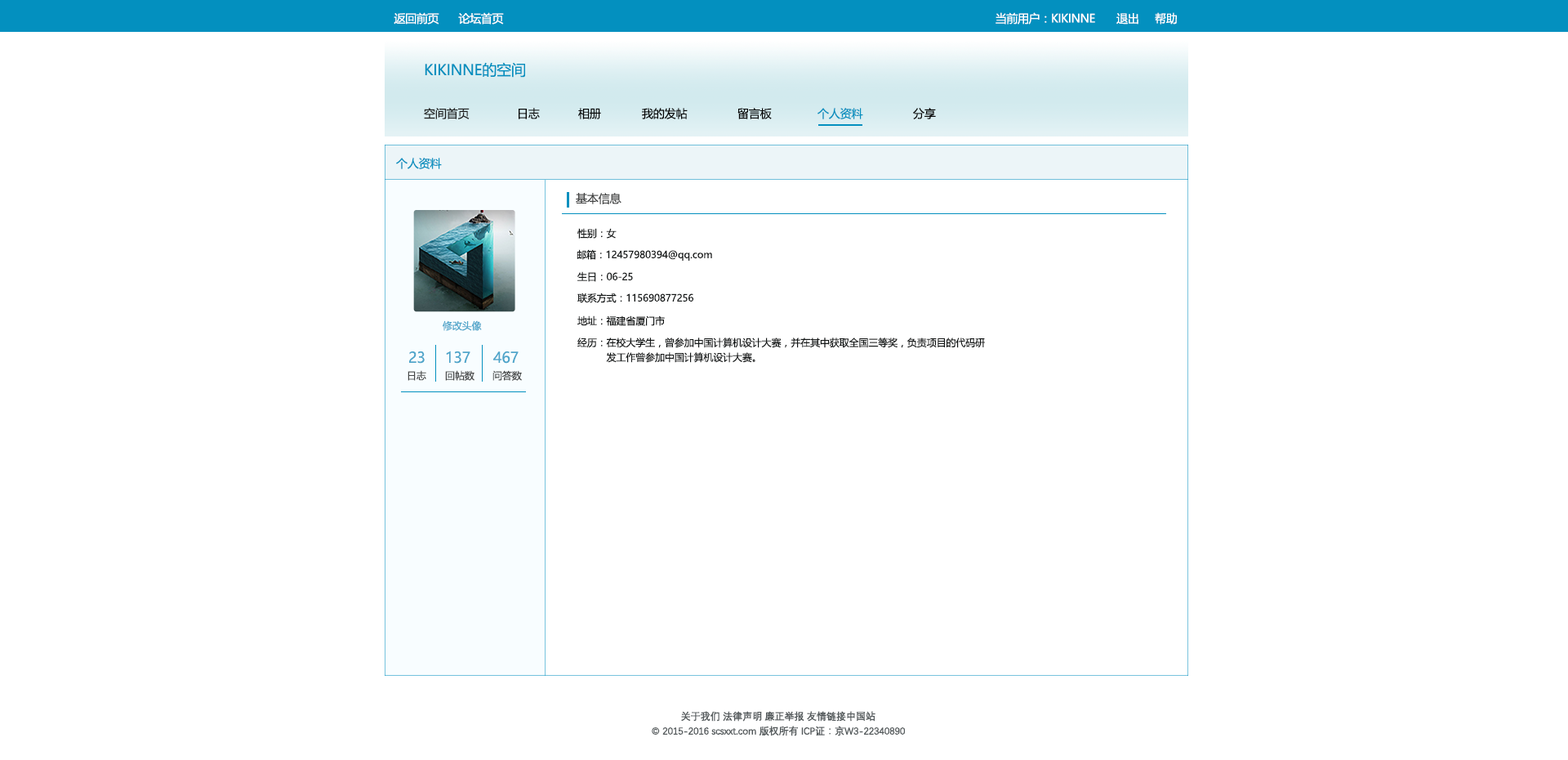
<style>
.page{position:relative;width:1568px;height:760px;background:#ffffff}
.page>*{position:absolute;margin:0}
.t1{font:11.4px "MicrosoftYaHei";letter-spacing:-0.025em;color:#ffffff}
.t2{font:14.7px "MicrosoftYaHei";letter-spacing:-0.01em;color:#0390bf}
.t3{font:11.4px "MicrosoftYaHei";letter-spacing:-0.01em;color:#212222}
.t4{font:11.4px "MicrosoftYaHei";letter-spacing:-0.01em;color:#040404}
.t5{font:11.4px "MicrosoftYaHei";letter-spacing:-0.01em;color:#0390bf}
.t6{font:11.4px "MicrosoftYaHei";letter-spacing:-0.01em;color:#404141}
.t7{font:9.8px "MicrosoftYaHei";letter-spacing:-0.01em;color:#131616}
.t8{font:9.8px "MicrosoftYaHei";letter-spacing:-0.01em;color:#4ea5ca}
.t9{font:9.8px/14.7px "MicrosoftYaHei";letter-spacing:-0.01em;color:#131616}
.t10{font:14.7px "MicrosoftYaHei";letter-spacing:-0.01em;color:#4ea5ca}
.t11{font:9.8px "MicrosoftYaHei";letter-spacing:-0.01em;color:#454646}
.t12{font:9.8px/14.7px "DengXian-Regular";letter-spacing:-0.025em;color:#545a5c;font-weight:bold}
</style>
<div class="page">
<p class="t1" style="left:394px;top:12px;width:45px;height:12px">返回前页</p>
<p class="t1" style="left:458px;top:12px;width:46px;height:12px">论坛首页</p>
<p class="t1" style="left:996px;top:12px;width:99px;height:12px">当前用户：KIKINNE</p>
<p class="t1" style="left:1116px;top:13px;width:22px;height:11px">退出</p>
<p class="t1" style="left:1155px;top:12px;width:22px;height:12px">帮助</p>
<p class="t2" style="left:425px;top:62px;width:100px;height:16px">KIKINNE的空间</p>
<p class="t3" style="left:424px;top:108px;width:46px;height:11px">空间首页</p>
<p class="t4" style="left:519px;top:108px;width:21px;height:11px">日志</p>
<p class="t4" style="left:578px;top:108px;width:23px;height:11px">相册</p>
<p class="t4" style="left:642px;top:108px;width:46px;height:11px">我的发帖</p>
<p class="t4" style="left:737px;top:108px;width:35px;height:11px">留言板</p>
<p class="t5" style="left:817px;top:108px;width:46px;height:11px">个人资料</p>
<p class="t4" style="left:913px;top:108px;width:23px;height:11px">分享</p>
<p class="t5" style="left:396px;top:158px;width:46px;height:11px">个人资料</p>
<p class="t6" style="left:576px;top:193px;width:45px;height:11px">基本信息</p>
<p class="t7" style="left:577px;top:228px;width:40px;height:10px">性别：女</p>
<p class="t7" style="left:577px;top:249px;width:135px;height:12px">邮箱：12457980394@qq.com</p>
<p class="t7" style="left:577px;top:271px;width:56px;height:11px">生日：06-25</p>
<p class="t7" style="left:577px;top:292px;width:117px;height:11px">联系方式：115690877256</p>
<p class="t7" style="left:577px;top:315px;width:88px;height:11px">地址：福建省厦门市</p>
<p class="t8" style="left:443px;top:320px;width:39px;height:11px">修改头像</p>
<p class="t9" style="left:577px;top:337px;width:408px;height:26px">经历：在校大学生，曾参加中国计算机设计大赛，并在其中获取全国三等奖，负责项目的代码研　　　发工作曾参加中国计算机设计大赛。</p>
<p class="t10" style="left:409px;top:351px;width:16px;height:12px">23</p>
<p class="t10" style="left:446px;top:350px;width:24px;height:13px">137</p>
<p class="t10" style="left:493px;top:351px;width:26px;height:12px">467</p>
<p class="t11" style="left:408px;top:370px;width:18px;height:11px">日志</p>
<p class="t11" style="left:445px;top:370px;width:29px;height:11px">回帖数</p>
<p class="t11" style="left:492px;top:370px;width:30px;height:11px">问答数</p>
<p class="t12" style="left:652px;top:710px;width:253px;height:26px;text-align:center">关于我们 法律声明 廉正举报 友情链接中国站<br>© 2015-2016 scsxxt.com 版权所有 ICP证：京W3-22340890</p>
</div>
